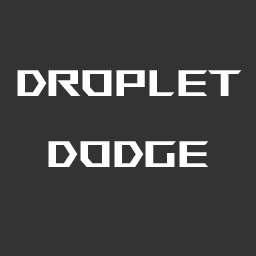
<style>
.page{position:relative;width:256px;height:256px;background:#333333}
.page>*{position:absolute;margin:0}
.t1{font:59px "ROGFontsv1.6-Regular";color:#fefefe}
</style>
<div class="page">
<p class="t1" style="left:17px;top:70px;width:225px;height:97px;text-align:center">Droplet<br>Dodge</p>
</div>
